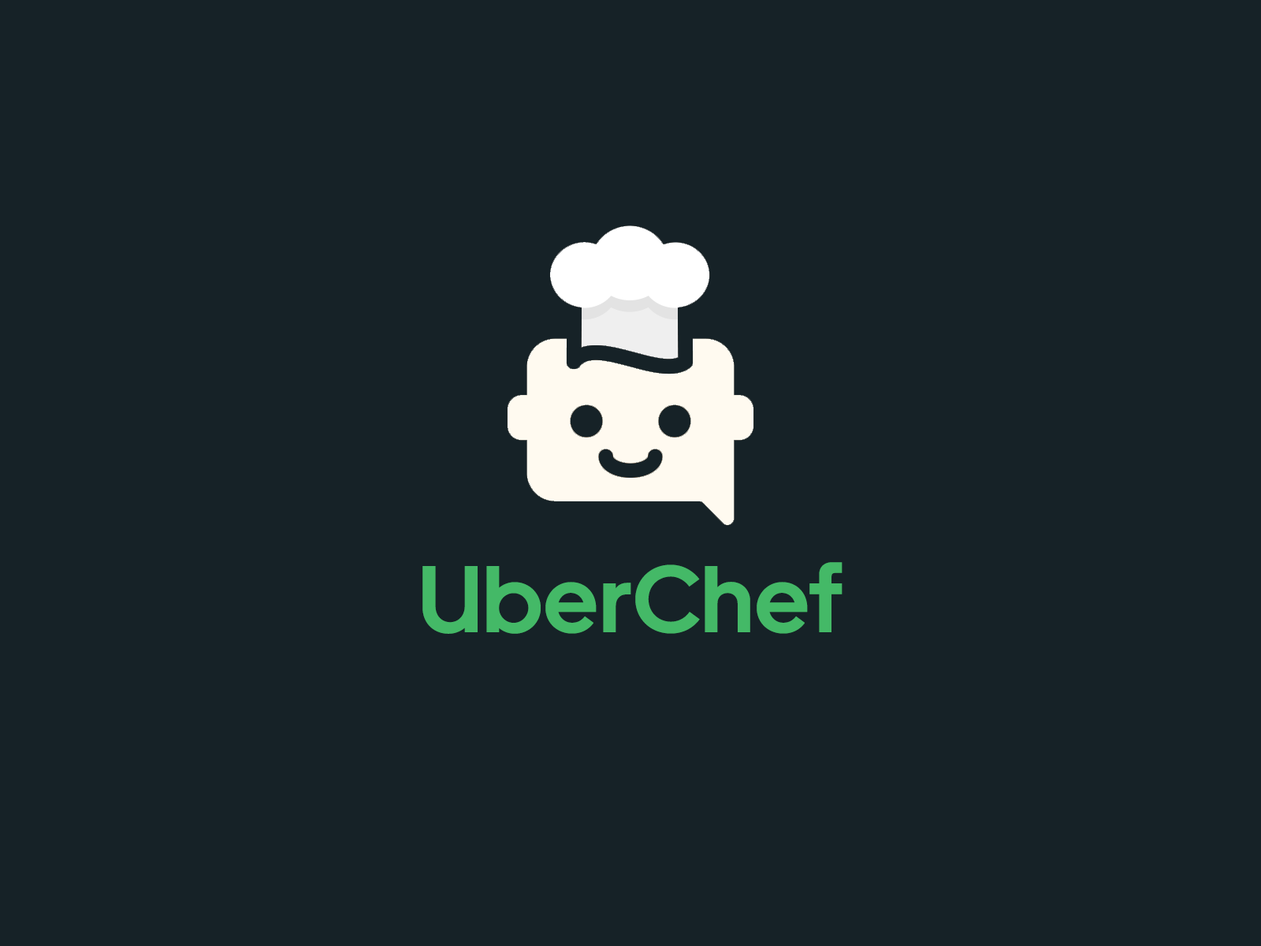
<style>
.page{position:relative;width:1261px;height:946px;background:#162227}
.page>*{position:absolute;margin:0}
.t1{font:94.6px "UberMove-Bold";color:#44b967}
</style>
<div class="page">
<p class="t1" style="left:422px;top:562px;width:420px;height:72px">UberChef</p>
</div>
